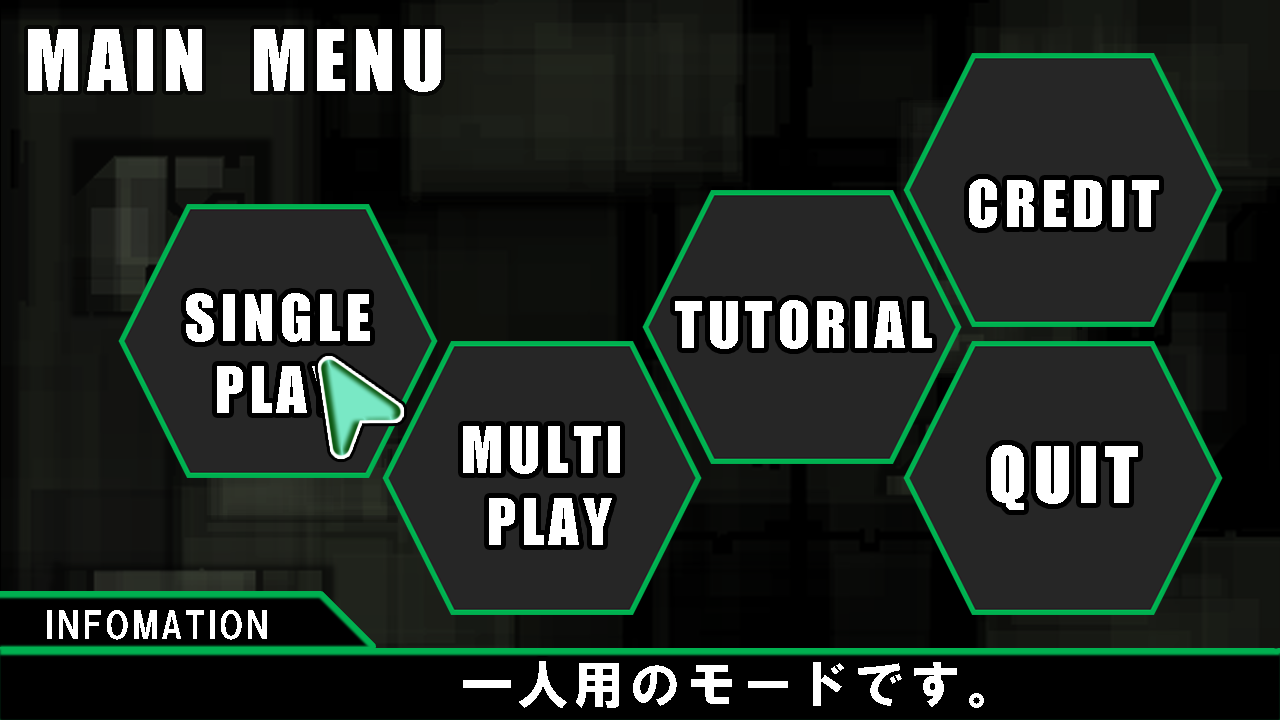
<style>
.page{position:relative;width:1280px;height:720px;background:#262626}
.page>*{position:absolute;margin:0}
.t1{font:78.3px "Impact";letter-spacing:0.08em;color:#ffffff}
.t2{font:60px "Impact";letter-spacing:0.08em;color:#ffffff}
.t3{font:72px "Impact";letter-spacing:0.08em;color:#ffffff}
.t4{font:36px "HGSSoeiKakugothicUB";letter-spacing:0.08em;color:#ffffff}
.t5{font:52px "HGSSoeiKakugothicUB";letter-spacing:0.08em;color:#ffffff}
</style>
<div class="page">
<p class="t1" style="left:28px;top:29px;width:413px;height:63px">MAIN  MENU</p>
<p class="t2" style="left:969px;top:179px;width:190px;height:49px">CREDIT</p>
<p class="t2" style="left:186px;top:293px;width:184px;height:120px;text-align:center">SINGLE<br>PLAY</p>
<p class="t2" style="left:675px;top:300px;width:257px;height:49px">TUTORIAL</p>
<p class="t2" style="left:463px;top:426px;width:157px;height:119px;text-align:center">MULTI<br> PLAY</p>
<p class="t3" style="left:991px;top:445px;width:147px;height:65px">QUIT</p>
<p class="t4" style="left:47px;top:610px;width:220px;height:30px">INFOMATION</p>
<p class="t5" style="left:463px;top:661px;width:521px;height:47px">一人用のモードです。</p>
</div>
